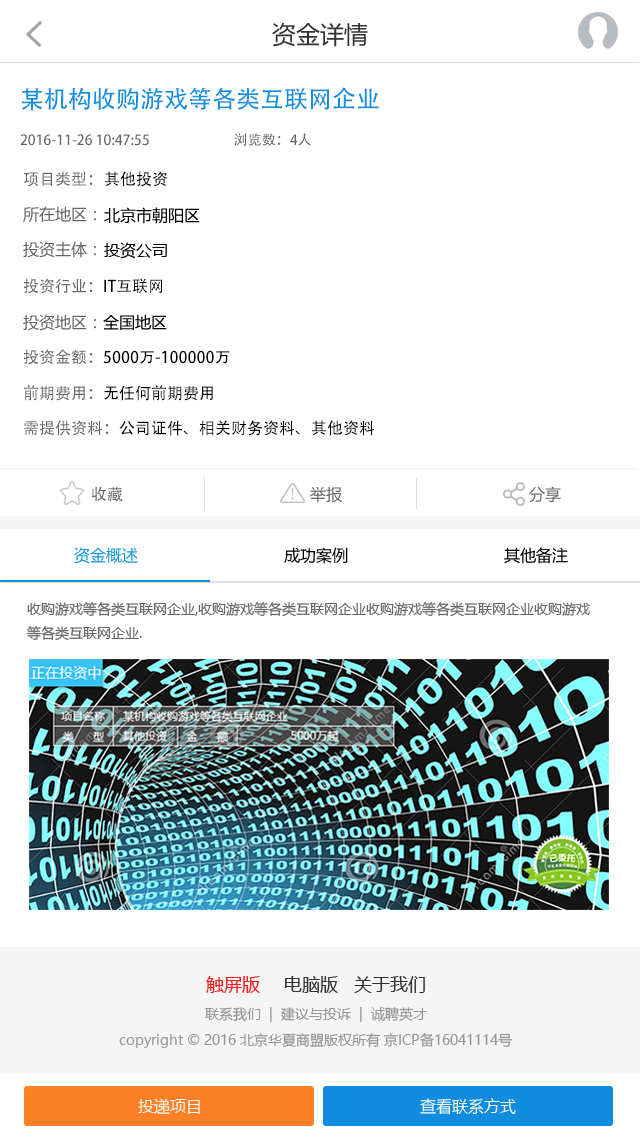
<style>
.page{position:relative;width:640px;height:1136px;background:#ffffff}
.page>*{position:absolute;margin:0}
.t1{font:24px "MicrosoftYaHei";color:#333333}
.t2{font:24px "AdobeHeitiStd-Regular";color:#0f91dd}
.t3{font:14px "AdobeHeitiStd-Regular";color:#666666}
.t4{font:16px "AdobeHeitiStd-Regular";color:#666666}
.t5{font:16px "AdobeHeitiStd-Regular";color:#000000}
.t6{font:16px "MicrosoftYaHei";color:#666666}
.t7{font:16px "MicrosoftYaHei";color:#000000}
.t8{font:16px "MicrosoftYaHei";color:#0f91dd}
.t9{font:14px/24px "MicrosoftYaHei";color:#666666}
.t10{font:18px "MicrosoftYaHei";color:#f11d1c}
.t11{font:18px "MicrosoftYaHei";color:#333333}
.t12{font:14px "MicrosoftYaHei";color:#969696}
.t13{font:16px "MicrosoftYaHei";color:#fafaf9}
</style>
<div class="page">
<p class="t1" style="left:272px;top:22px;width:96px;height:25px">资金详情</p>
<p class="t2" style="left:21px;top:87px;width:358px;height:24px">某机构收购游戏等各类互联网企业</p>
<p class="t3" style="left:20px;top:133px;width:291px;height:13px">2016-11-26 10:47:55　　　　　　浏览数：4人</p>
<p class="t4" style="left:24px;top:171px;width:69px;height:16px">项目类型：</p>
<p class="t5" style="left:105px;top:171px;width:63px;height:16px">其他投资</p>
<p class="t6" style="left:23px;top:206px;width:73px;height:17px">所在地区：</p>
<p class="t7" style="left:104px;top:207px;width:96px;height:17px">北京市朝阳区</p>
<p class="t6" style="left:23px;top:241px;width:73px;height:17px">投资主体：</p>
<p class="t7" style="left:104px;top:242px;width:63px;height:17px">投资公司</p>
<p class="t4" style="left:23px;top:278px;width:140px;height:16px">投资行业：<span class="t5">IT互联网</span></p>
<p class="t6" style="left:23px;top:314px;width:144px;height:17px">投资地区：<span class="t7">全国地区</span></p>
<p class="t5" style="left:23px;top:349px;width:207px;height:16px"><span class="t4">投资金额：</span>5000万-100000万</p>
<p class="t5" style="left:24px;top:385px;width:189px;height:16px"><span class="t4">前期费用：</span>无任何前期费用</p>
<p class="t5" style="left:24px;top:420px;width:350px;height:16px"><span class="t4">需提供资料：</span>公司证件、相关财务资料、其他资料</p>
<p class="t4" style="left:91px;top:486px;width:32px;height:16px">收藏</p>
<p class="t6" style="left:310px;top:486px;width:32px;height:17px">举报</p>
<p class="t6" style="left:529px;top:486px;width:32px;height:17px">分享</p>
<p class="t8" style="left:74px;top:547px;width:64px;height:17px">资金概述</p>
<p class="t7" style="left:284px;top:547px;width:64px;height:17px">成功案例</p>
<p class="t7" style="left:504px;top:547px;width:64px;height:17px">其他备注</p>
<p class="t9" style="left:26px;top:602px;width:564px;height:39px">收购游戏等各类互联网企业,收购游戏等各类互联网企业收购游戏等各类互联网企业收购游戏<br>等各类互联网企业.</p>
<p class="t10" style="left:206px;top:976px;width:54px;height:17px">触屏版</p>
<p class="t11" style="left:285px;top:976px;width:53px;height:17px">电脑版</p>
<p class="t11" style="left:354px;top:976px;width:71px;height:17px">关于我们</p>
<p class="t12" style="left:205px;top:1007px;width:222px;height:15px">联系我们  |  建议与投诉  |  诚聘英才</p>
<p class="t12" style="left:119px;top:1033px;width:394px;height:15px">copyright © 2016 北京华夏商盟版权所有 京ICP备16041114号</p>
<p class="t13" style="left:138px;top:1098px;width:62px;height:16px">投递项目</p>
<p class="t13" style="left:420px;top:1098px;width:96px;height:17px">查看联系方式</p>
</div>
